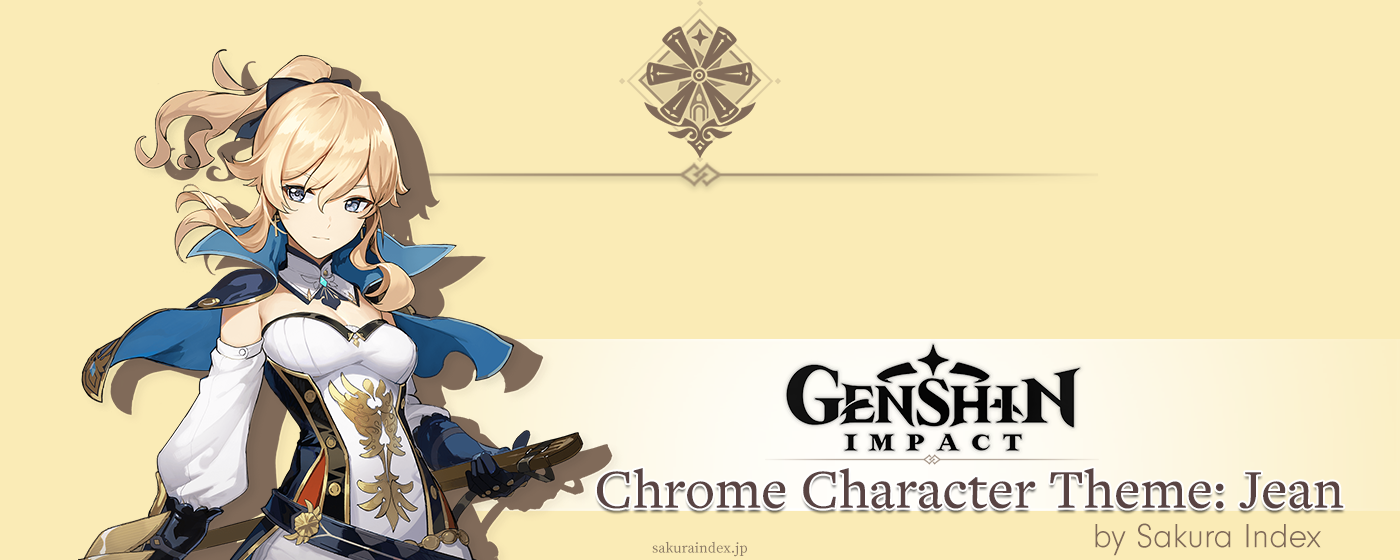
<style>
.page{position:relative;width:1400px;height:560px;background:#faebb6}
.page>*{position:absolute;margin:0}
.t1{font:57px "FreightTextProMedium-Regular";color:#594443}
.t2{font:34.8px "NeuzeitGro-Lig";color:#806a59}
.t3{font:14.3px "SourceSerifPro-Regular";color:#8c7b67}
</style>
<div class="page">
<p class="t1" style="left:596px;top:468px;width:748px;height:41px">Chrome Character Theme: Jean</p>
<p class="t2" style="left:1095px;top:523px;width:226px;height:33px">by Sakura Index</p>
<p class="t3" style="left:652px;top:541px;width:95px;height:16px">sakuraindex.jp</p>
</div>
